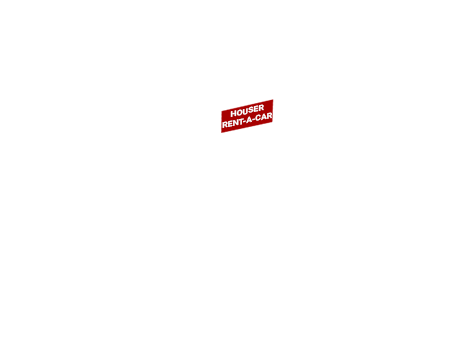
<style>
.page{position:relative;width:454px;height:340px;background:#ffffff}
.page>*{position:absolute;margin:0}
.t1{font:7.7px "Roboto-Bold";color:#fdfdfd;scale:1.15 1}
</style>
<div class="page">
<p class="t1" style="left:222px;top:104px;width:50px;height:24px;text-align:center;rotate:-13deg">HOUSER<br>RENT-A-CAR</p>
</div>
